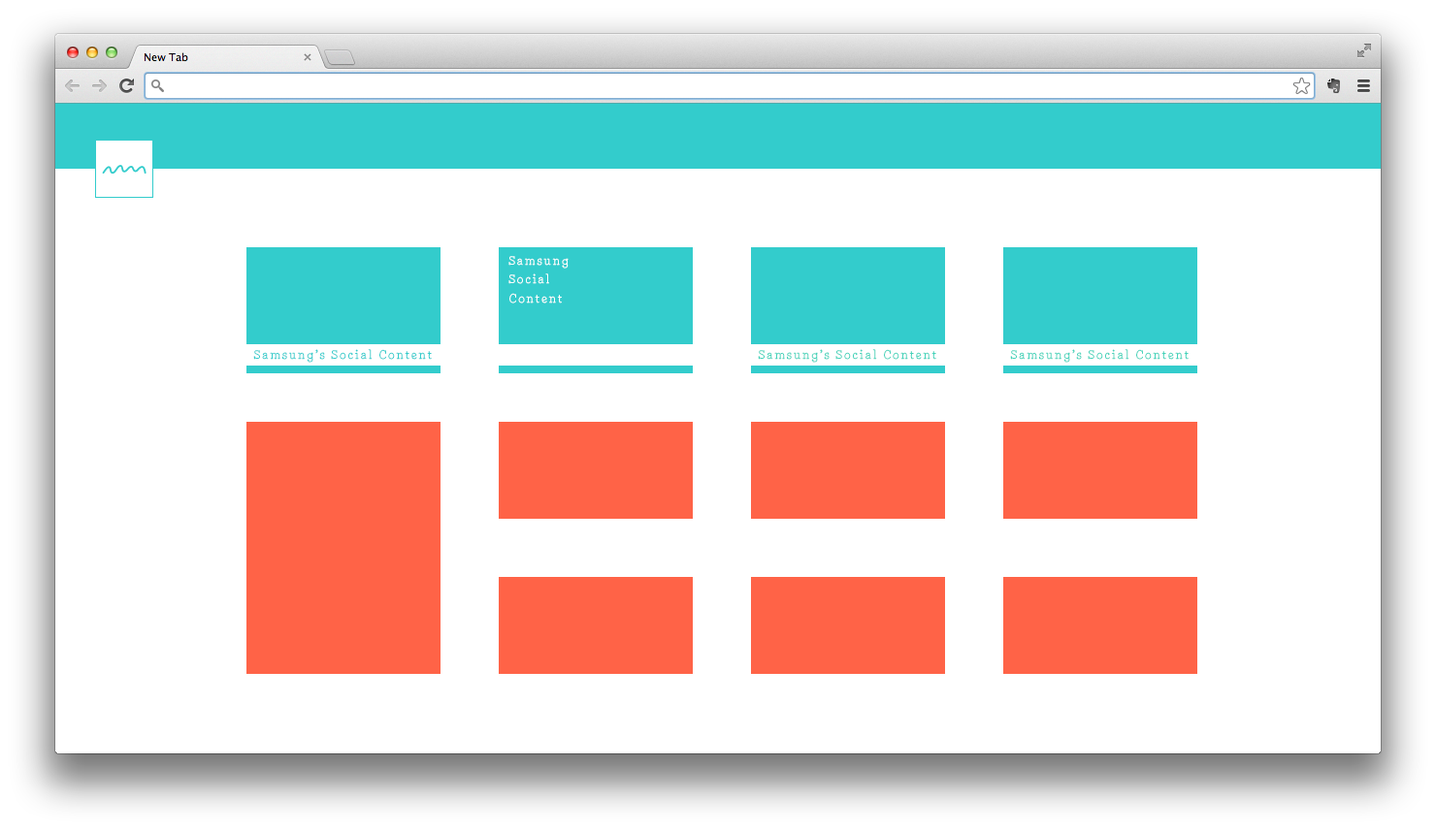
<style>
.page{position:relative;width:1436px;height:830px;background:#ffffff}
.page>*{position:absolute;margin:0}
.t1{font:15.5px "MarcusFont";color:#ffffff}
.t2{font:15.5px "MarcusFont";color:#33cccc}
.t3{font:15.5px "MarcusFont";color:#43d3ba}
</style>
<div class="page">
<p class="t1" style="left:508px;top:256px;width:61px;height:48px">Samsung<br>Social<br>Content</p>
<p class="t2" style="left:253px;top:349px;width:179px;height:14px">Samsung’s Social Content</p>
<p class="t3" style="left:758px;top:349px;width:178px;height:14px">Samsung’s Social Content</p>
<p class="t3" style="left:1010px;top:349px;width:178px;height:14px">Samsung’s Social Content</p>
</div>
